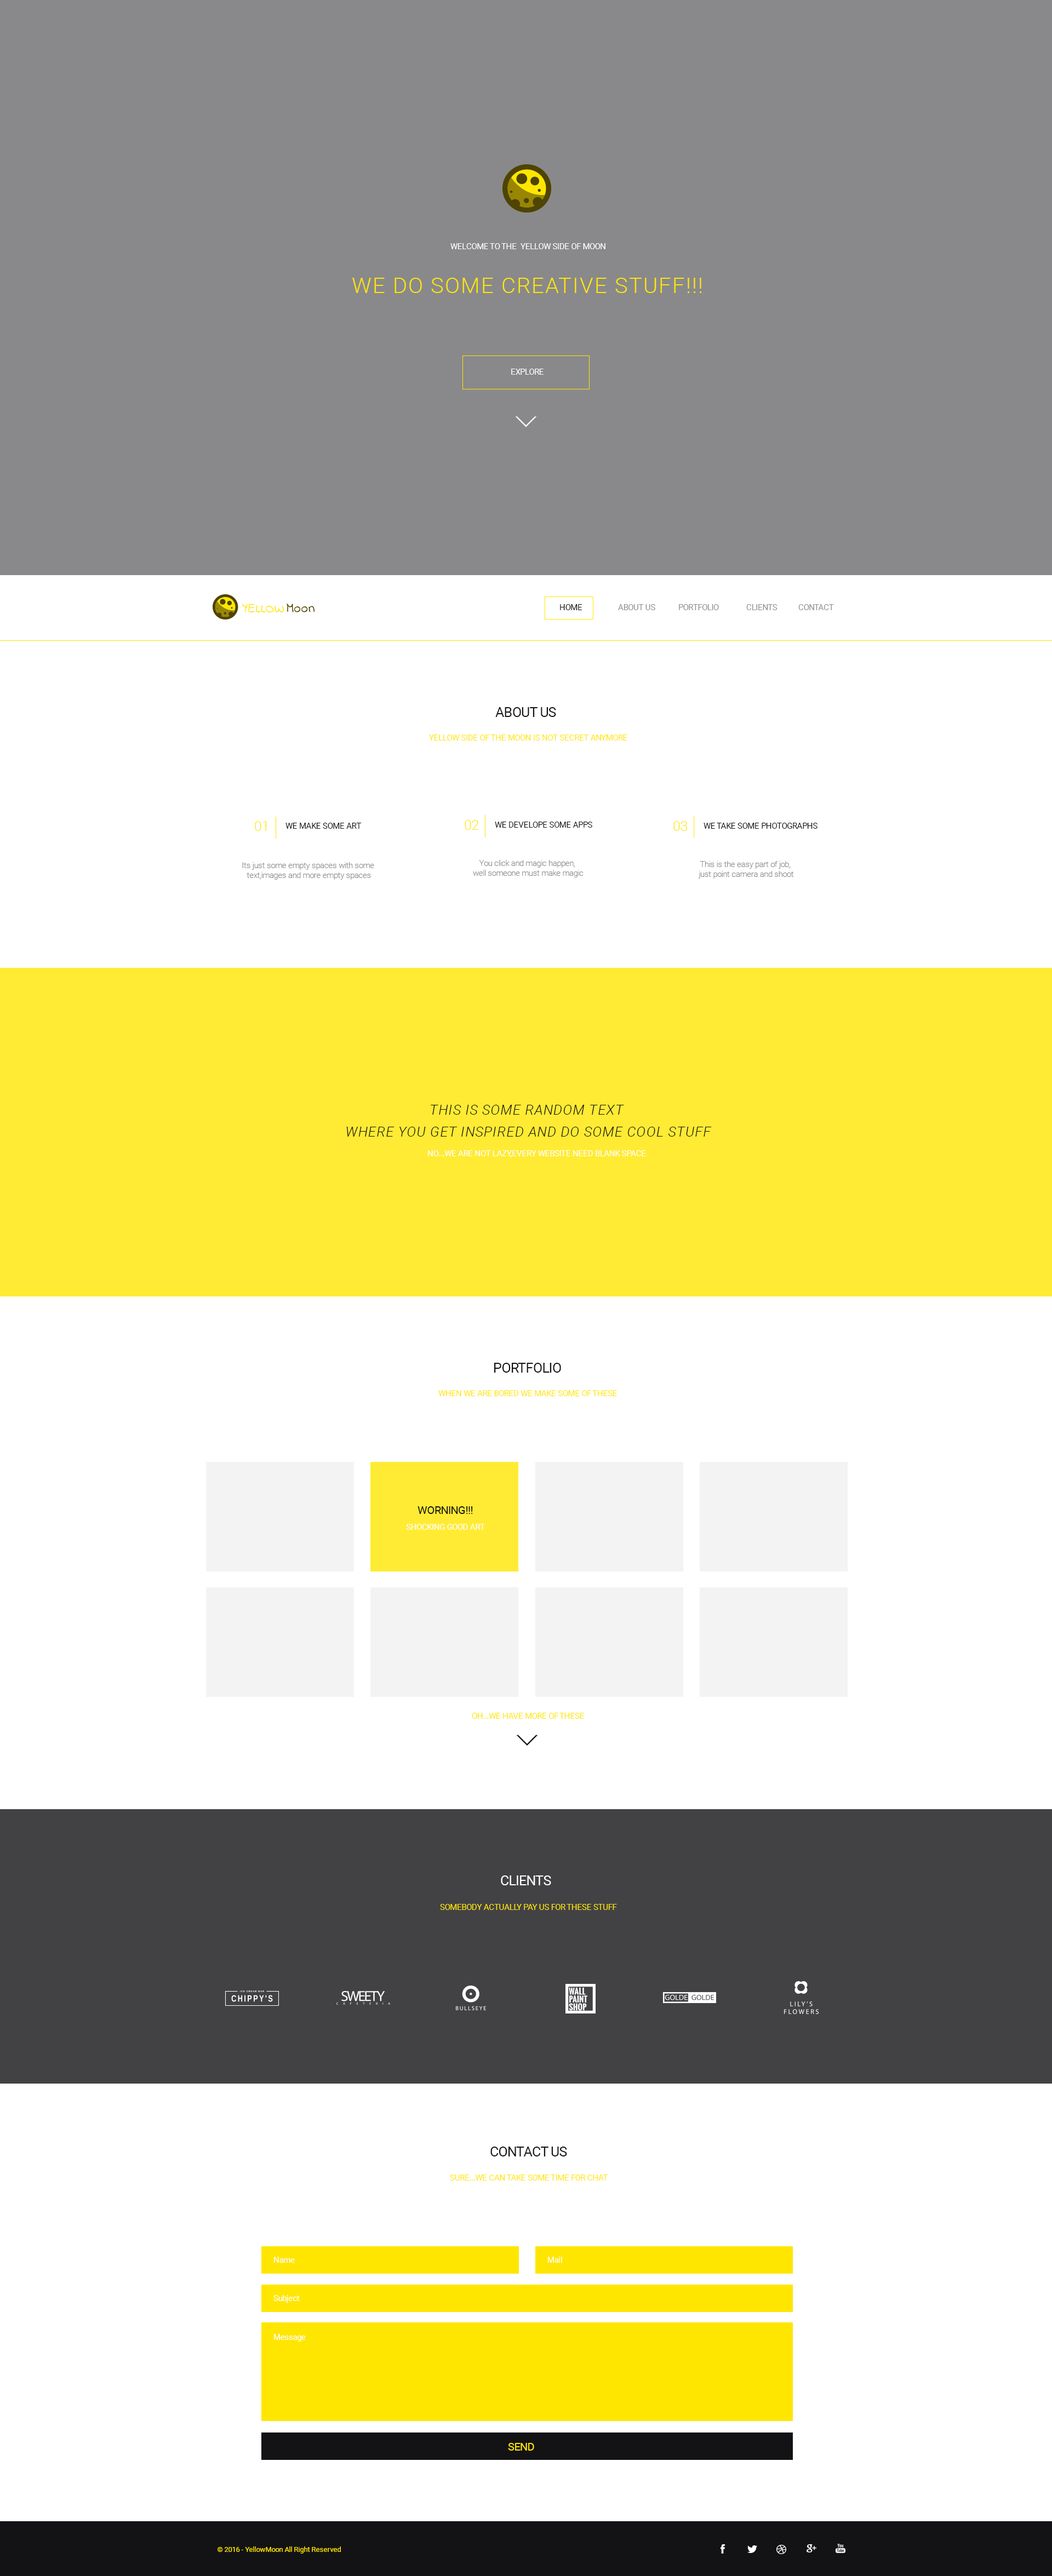
<style>
.page{position:relative;width:1052px;height:2576px;background:#ffffff}
.page>*{position:absolute;margin:0}
.t1{font:8.2px "Roboto-Regular";letter-spacing:-0.025em;color:#ffffff}
.t2{font:21.9px "Roboto-Light";letter-spacing:0.05em;color:#ffe600}
.t3{font:8.2px "Roboto-Regular";letter-spacing:-0.025em;color:#131316}
.t4{font:8.2px "Roboto-Regular";letter-spacing:-0.025em;color:#8e8e8e}
.t5{font:13.7px "Roboto-Regular";letter-spacing:-0.025em;color:#131316}
.t6{font:8.2px "Roboto-Regular";letter-spacing:-0.025em;color:#ffe600}
.t7{font:13.7px "Roboto-Light";letter-spacing:-0.025em;color:#ffe600}
.t8{font:8.2px "Roboto-Light";letter-spacing:-0.025em;color:#8e8e8e}
.t9{font:13.7px/21.9px "Roboto-LightItalic";letter-spacing:0.05em;color:#131316}
.t10{font:11px "Roboto-Regular";letter-spacing:-0.025em;color:#131316}
.t11{font:13.7px "Roboto-Regular";letter-spacing:-0.025em;color:#ffffff}
.t12{font:11px "Roboto-Regular";letter-spacing:-0.025em;color:#ffe600}
.t13{font:7.1px "Roboto-Regular";color:#ffe600}
</style>
<div class="page">
<p class="t1" style="left:450px;top:243px;width:155px;height:6px">WELCOME TO THE  YELLOW SIDE OF MOON</p>
<p class="t2" style="left:352px;top:278px;width:350px;height:15px">WE DO SOME CREATIVE STUFF!!!</p>
<p class="t1" style="left:511px;top:369px;width:32px;height:6px">EXPLORE</p>
<p class="t3" style="left:560px;top:604px;width:22px;height:6px">HOME</p>
<p class="t4" style="left:618px;top:604px;width:37px;height:6px">ABOUT US</p>
<p class="t4" style="left:679px;top:604px;width:40px;height:6px">PORTFOLIO</p>
<p class="t4" style="left:746px;top:604px;width:31px;height:6px">CLIENTS</p>
<p class="t4" style="left:798px;top:604px;width:36px;height:6px">CONTACT</p>
<p class="t5" style="left:495px;top:707px;width:61px;height:10px">ABOUT US</p>
<p class="t6" style="left:429px;top:735px;width:198px;height:6px">YELLOW SIDE OF THE MOON IS NOT SECRET ANYMORE</p>
<p class="t7" style="left:255px;top:821px;width:12px;height:10px">01</p>
<p class="t7" style="left:464px;top:820px;width:15px;height:10px">02</p>
<p class="t3" style="left:495px;top:822px;width:97px;height:6px">WE DEVELOPE SOME APPS</p>
<p class="t7" style="left:673px;top:821px;width:14px;height:10px">03</p>
<p class="t3" style="left:285px;top:823px;width:77px;height:6px">WE MAKE SOME ART</p>
<p class="t3" style="left:703px;top:823px;width:114px;height:6px">WE TAKE SOME PHOTOGRAPHS</p>
<p class="t8" style="left:242px;top:862px;width:132px;height:18px;text-align:center">Its just some empty spaces with some <br>text,images and more empty spaces</p>
<p class="t8" style="left:473px;top:860px;width:110px;height:17px;text-align:center">You click and magic happen, <br>well someone must make magic</p>
<p class="t8" style="left:698px;top:861px;width:96px;height:18px;text-align:center">This is the easy part of job, <br>just point camera and shoot</p>
<p class="t9" style="left:346px;top:1105px;width:366px;height:32px;text-align:center">THIS IS SOME RANDOM TEXT <br>WHERE YOU GET INSPIRED AND DO SOME COOL STUFF</p>
<p class="t1" style="left:428px;top:1150px;width:218px;height:7px">NO...WE ARE NOT LAZY,EVERY WEBSITE NEED BLANK SPACE</p>
<p class="t5" style="left:494px;top:1363px;width:67px;height:10px">PORTFOLIO</p>
<p class="t6" style="left:438px;top:1390px;width:179px;height:6px">WHEN WE ARE BORED WE MAKE SOME OF THESE</p>
<p class="t10" style="left:417px;top:1506px;width:56px;height:8px">WORNING!!!</p>
<p class="t1" style="left:406px;top:1524px;width:79px;height:6px">SHOCKING GOOD ART</p>
<p class="t6" style="left:472px;top:1713px;width:112px;height:6px">OH...WE HAVE MORE OF THESE</p>
<p class="t11" style="left:501px;top:1875px;width:50px;height:10px">CLIENTS</p>
<p class="t6" style="left:440px;top:1904px;width:177px;height:6px">SOMEBODY ACTUALLY PAY US FOR THESE STUFF</p>
<p class="t5" style="left:490px;top:2147px;width:77px;height:9px">CONTACT US</p>
<p class="t6" style="left:450px;top:2175px;width:158px;height:6px">SURE...WE CAN TAKE SOME TIME FOR CHAT</p>
<p class="t1" style="left:274px;top:2257px;width:21px;height:6px">Name</p>
<p class="t1" style="left:548px;top:2257px;width:14px;height:6px">Mail</p>
<p class="t1" style="left:273px;top:2295px;width:27px;height:8px">Subject</p>
<p class="t1" style="left:274px;top:2334px;width:32px;height:8px">Message</p>
<p class="t12" style="left:508px;top:2443px;width:26px;height:8px">SEND</p>
<p class="t13" style="left:217px;top:2546px;width:124px;height:8px">© 2016 - YellowMoon All Right Reserved</p>
</div>
